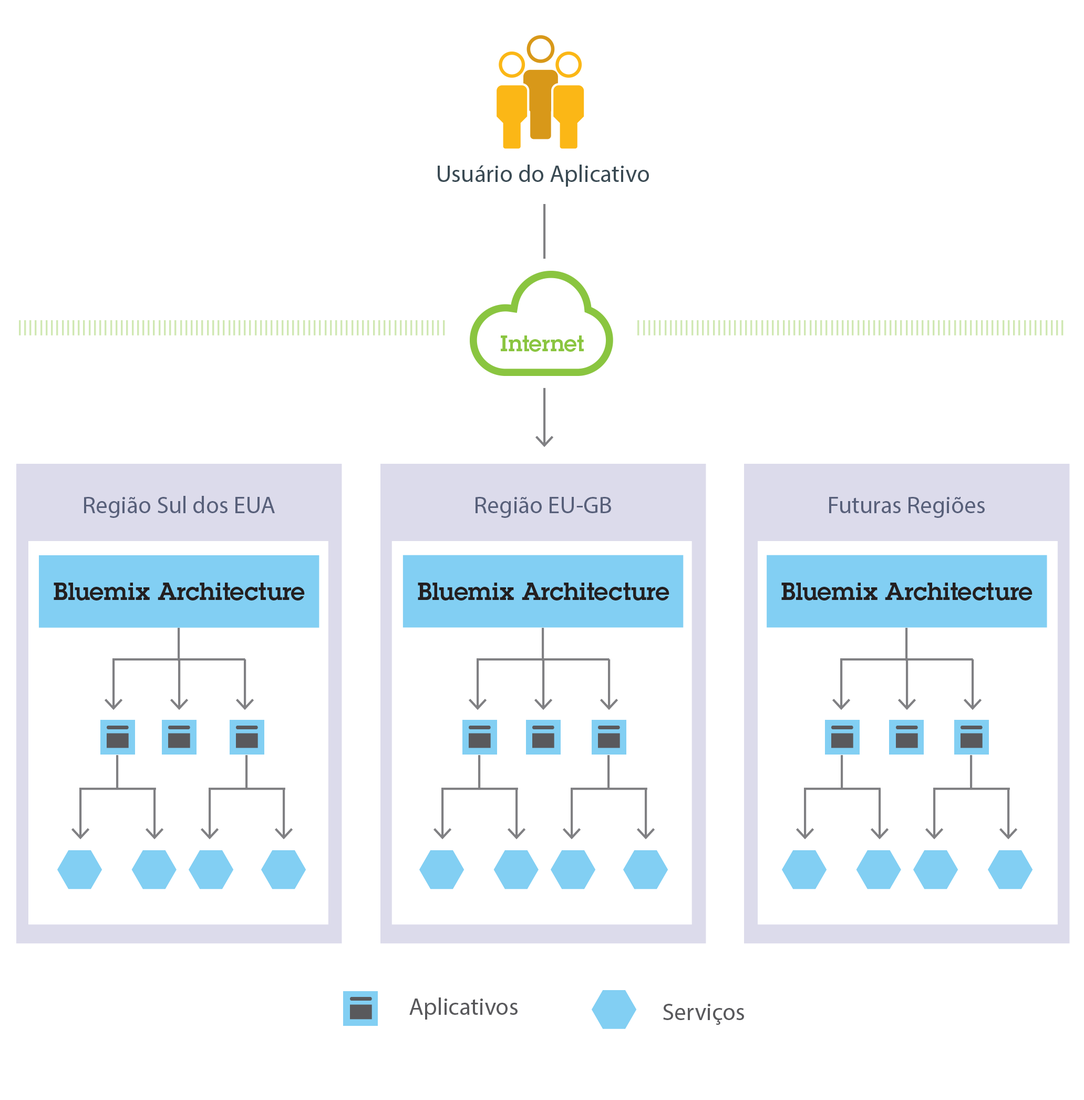
<style>
.page{position:relative;width:1084px;height:1100px;background:#ffffff}
.page>*{position:absolute;margin:0}
.t1{font:24.1px "MyriadPro-Regular";color:#3b4b54}
.t2{font:21.9px "LubalinDemiforIBM";color:#8ac540}
.t3{font:24.1px "MyriadPro-Regular";color:#58607a}
.t4{font:24.1px "LubalinDemiforIBM";color:#231f20}
.t5{font:24.1px "MyriadPro-Regular";color:#59595c}
</style>
<div class="page">
<p class="t1" style="left:438px;top:165px;width:211px;height:22px">Usuário do Aplicativo</p>
<p class="t2" style="left:501px;top:335px;width:83px;height:17px">Internet</p>
<p class="t3" style="left:84px;top:496px;width:191px;height:22px">Região Sul dos EUA</p>
<p class="t3" style="left:476px;top:497px;width:135px;height:21px">Região EU-GB</p>
<p class="t3" style="left:829px;top:497px;width:156px;height:21px">Futuras Regiões</p>
<p class="t4" style="left:54px;top:582px;width:251px;height:18px">Bluemix Architecture</p>
<p class="t4" style="left:418px;top:582px;width:252px;height:18px">Bluemix Architecture</p>
<p class="t4" style="left:782px;top:582px;width:251px;height:18px">Bluemix Architecture</p>
<p class="t5" style="left:409px;top:997px;width:109px;height:22px">Aplicativos</p>
<p class="t5" style="left:663px;top:1003px;width:81px;height:21px">Serviços</p>
</div>
